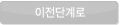
<style>
.page{position:relative;width:120px;height:25px;background:#bdbdbd}
.page>*{position:absolute;margin:0}
.t1{font:12.1px "YDIYGO330";color:#ffffff;scale:0.91 1}
</style>
<div class="page">
<p class="t1" style="left:35px;top:7px;width:51px;height:11px">이전단계로</p>
</div>
